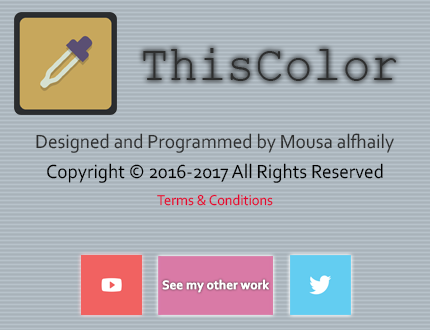
<style>
.page{position:relative;width:430px;height:330px}
.page>*{position:absolute;margin:0}
.t1{font:50px "CourierNewPSMT";color:#2e2f2f;scale:0.96 1}
.t2{font:20px "Corbel";color:#2e2f2f;scale:0.96 1}
.t3{font:20px "Corbel";color:#000000;scale:0.96 1}
.t4{font:15px "Corbel";color:#e4052f;scale:0.96 1}
.t5{font:13px "Corbel-Bold";color:#ffffff;font-weight:bold;scale:0.96 1}
</style>
<div class="page">
<p class="t1" style="left:143px;top:48px;width:254px;height:33px">ThisColor</p>
<p class="t2" style="left:36px;top:133px;width:358px;height:20px">Designed and Programmed by Mousa alfhaily</p>
<p class="t3" style="left:47px;top:163px;width:336px;height:20px">Copyright © 2016-2017 All Rights Reserved</p>
<p class="t4" style="left:157px;top:194px;width:116px;height:12px">Terms &amp; Conditions</p>
<p class="t5" style="left:162px;top:279px;width:107px;height:14px">See my other work</p>
</div>
